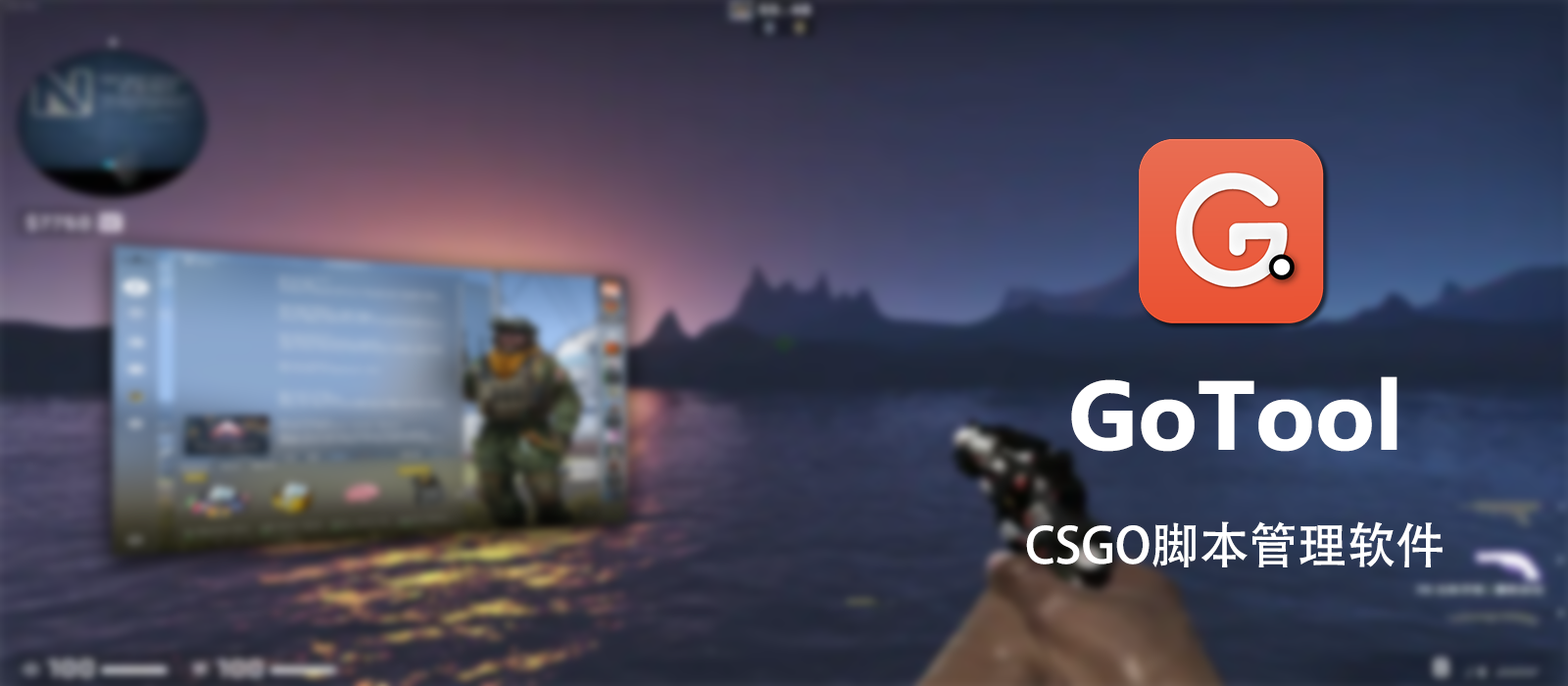
<style>
.page{position:relative;width:1568px;height:686px}
.page>*{position:absolute;margin:0}
.t1{font:98px "SegoeUI-Bold";color:#ffffff}
.t2{font:49px "AdobeHeitiStd-Regular";color:#ffffff}
</style>
<div class="page">
<p class="t1" style="left:1071px;top:376px;width:326px;height:76px">GoTool</p>
<p class="t2" style="left:1026px;top:521px;width:417px;height:46px">CSGO脚本管理软件</p>
</div>
